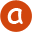
<style>
.page{position:relative;width:32px;height:32px;background:#d1450d}
.page>*{position:absolute;margin:0}
.t1{font:32px "ComicSansMS";color:#ffffff}
</style>
<div class="page">
<p class="t1" style="left:7px;top:8px;width:16px;height:16px">a</p>
</div>
